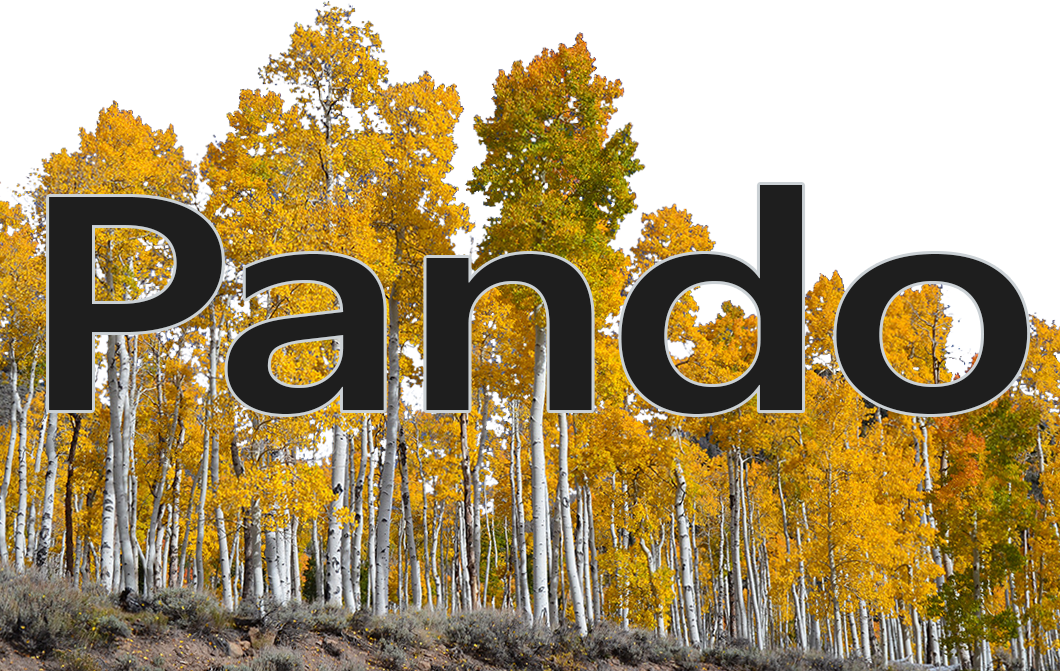
<style>
.page{position:relative;width:1060px;height:671px;background:#ffffff}
.page>*{position:absolute;margin:0}
.t1{font:303.6px "SegoeUI-SemiBold";letter-spacing:-0.025em;color:#1e1e1e;scale:1.22 1}
</style>
<div class="page">
<p class="t1" style="left:49px;top:185px;width:979px;height:229px">Pando</p>
</div>
